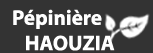
<style>
.page{position:relative;width:153px;height:53px;background:#333333}
.page>*{position:absolute;margin:0}
.t1{font:21.2px "MyriadPro-Bold";color:#ffffff}
</style>
<div class="page">
<p class="t1" style="left:13px;top:9px;width:102px;height:42px">Pépinière <br>   HAOUZIA</p>
</div>
